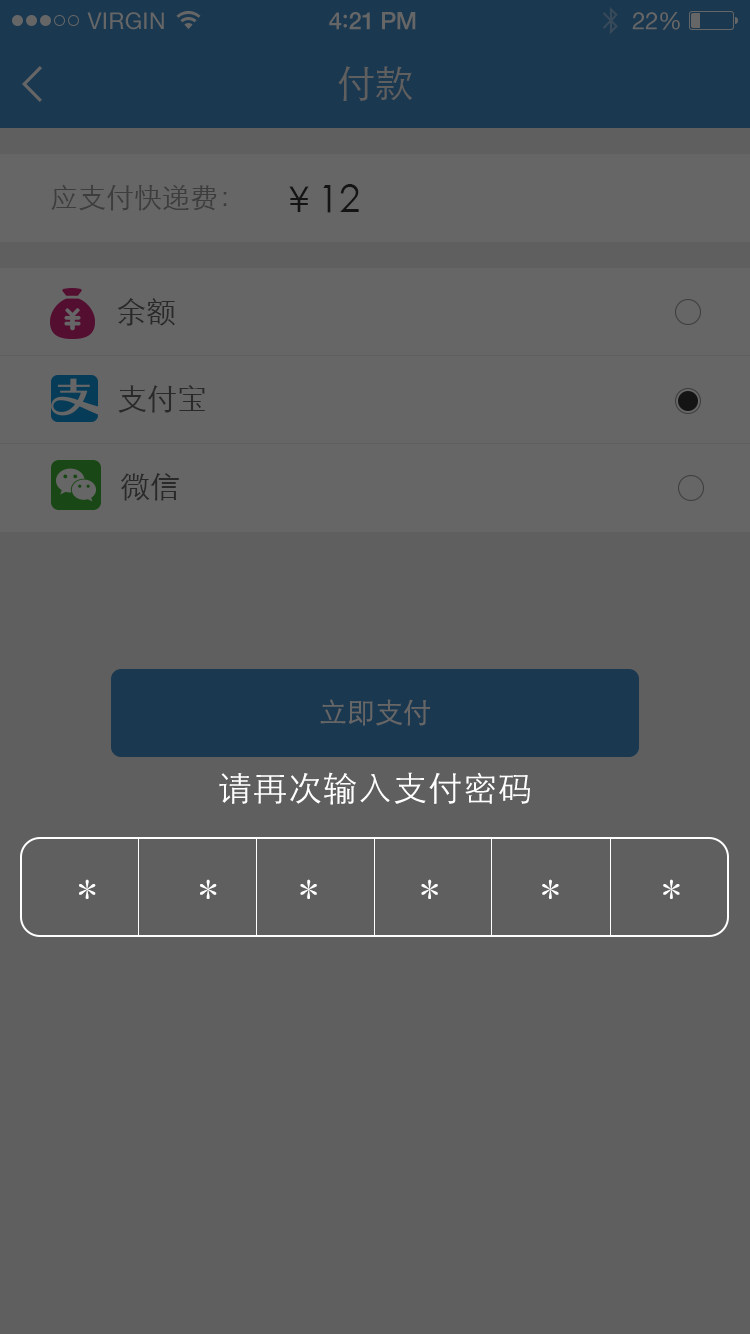
<style>
.page{position:relative;width:750px;height:1334px;background:#5f5f5f}
.page>*{position:absolute;margin:0}
.t1{font:23px "HelveticaNeue";letter-spacing:0.02em;color:#666666}
.t2{font:24px "HelveticaNeue-Medium";letter-spacing:-0.02em;color:#666666}
.t3{font:26px "Avenir-Medium";letter-spacing:-0.02em;color:#666666}
.t4{font:24px "HelveticaNeue";letter-spacing:-0.02em;color:#666666}
.t5{font:38px "STXihei";color:#5f5f5f}
.t6{font:28px "STXihei";color:#3d3d3d}
.t7{font:38px "STXihei";color:#141414}
.t8{font:30px "STXihei";color:#292929}
.t9{font:28px "STXihei";color:#666666}
.t10{font:34px "STXihei";letter-spacing:0.03em;color:#ffffff}
.t11{font:38px "SimSun";letter-spacing:0.03em;color:#ffffff}
</style>
<div class="page">
<p class="t1" style="left:87px;top:12px;width:77px;height:18px">VIRGIN</p>
<p class="t2" style="left:329px;top:12px;width:87px;height:18px">4<span class="t3">:</span>21 PM</p>
<p class="t4" style="left:632px;top:12px;width:48px;height:18px">22%</p>
<p class="t5" style="left:338px;top:66px;width:74px;height:35px">付款</p>
<p class="t6" style="left:51px;top:184px;width:176px;height:27px">应支付快递费：</p>
<p class="t7" style="left:289px;top:184px;width:70px;height:29px">￥12</p>
<p class="t8" style="left:117px;top:298px;width:58px;height:28px">余额</p>
<p class="t8" style="left:118px;top:385px;width:87px;height:28px">支付宝</p>
<p class="t8" style="left:120px;top:473px;width:59px;height:28px">微信</p>
<p class="t9" style="left:320px;top:699px;width:110px;height:27px">立即支付</p>
<p class="t10" style="left:219px;top:772px;width:311px;height:33px">请再次输入支付密码</p>
<p class="t11" style="left:79px;top:879px;width:601px;height:20px">*     *    *     *     *     *</p>
</div>
